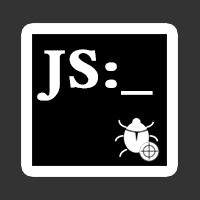
<style>
.page{position:relative;width:200px;height:200px;background:#333333}
.page>*{position:absolute;margin:0}
.t1{font:58.8px "08";color:#ffffff;font-weight:bold}
</style>
<div class="page">
<p class="t1" style="left:37px;top:49px;width:116px;height:52px">JS:_</p>
</div>
